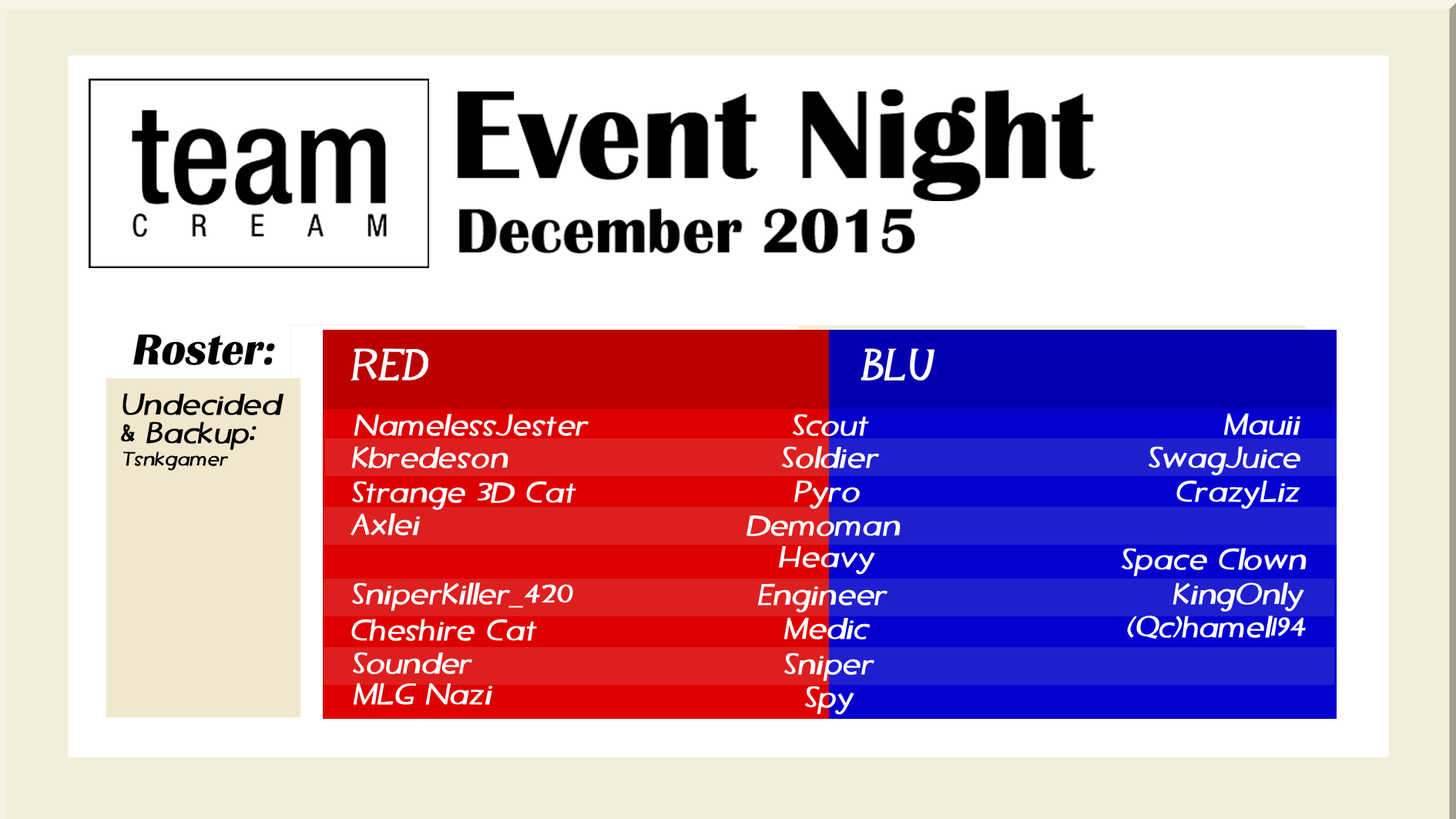
<style>
.page{position:relative;width:1456px;height:819px;background:#ffffff}
.page>*{position:absolute;margin:0}
.t1{font:44.8px "BritannicBold";color:#000000;font-style:italic}
.t2{font:44.8px "TF2";color:#ffffff;font-weight:bold;font-style:italic}
.t3{font:30px/28.8px "TF2Secondary";color:#000000;font-weight:bold;font-style:italic}
.t4{font:30px "TF2Secondary";color:#ffffff;font-weight:bold;font-style:italic}
.t5{font:19.2px "TF2Secondary";color:#000000;font-weight:bold;font-style:italic}
</style>
<div class="page">
<p class="t1" style="left:133px;top:334px;width:142px;height:31px">Roster:</p>
<p class="t2" style="left:351px;top:348px;width:77px;height:33px">Red</p>
<p class="t2" style="left:861px;top:348px;width:74px;height:33px">BLU</p>
<p class="t3" style="left:121px;top:393px;width:163px;height:57px">Undecided<br>&amp; Backup:</p>
<p class="t4" style="left:354px;top:414px;width:235px;height:22px">NamelessJester</p>
<p class="t4" style="left:793px;top:414px;width:76px;height:22px">Scout</p>
<p class="t4" style="left:1223px;top:413px;width:77px;height:22px">Mauii</p>
<p class="t4" style="left:351px;top:446px;width:157px;height:22px">Kbredeson</p>
<p class="t4" style="left:782px;top:446px;width:97px;height:22px">Soldier</p>
<p class="t4" style="left:1149px;top:446px;width:151px;height:29px">SwagJuice</p>
<p class="t5" style="left:123px;top:451px;width:105px;height:20px">Tsnkgamer</p>
<p class="t4" style="left:352px;top:481px;width:224px;height:29px">Strange 3D Cat</p>
<p class="t4" style="left:794px;top:480px;width:66px;height:29px">Pyro</p>
<p class="t4" style="left:1176px;top:480px;width:124px;height:29px">CrazyLiz</p>
<p class="t4" style="left:351px;top:513px;width:69px;height:22px">Axlei</p>
<p class="t4" style="left:747px;top:515px;width:154px;height:21px">Demoman</p>
<p class="t4" style="left:779px;top:545px;width:96px;height:30px">Heavy</p>
<p class="t4" style="left:1122px;top:548px;width:185px;height:28px">Space Clown</p>
<p class="t4" style="left:352px;top:582px;width:221px;height:29px">SniperKiller_420</p>
<p class="t4" style="left:758px;top:583px;width:130px;height:29px">Engineer</p>
<p class="t4" style="left:1173px;top:582px;width:131px;height:30px">KingOnly</p>
<p class="t4" style="left:784px;top:617px;width:86px;height:22px">Medic</p>
<p class="t4" style="left:1127px;top:616px;width:179px;height:23px">(Qc)hamel194</p>
<p class="t4" style="left:351px;top:619px;width:186px;height:22px">Cheshire Cat</p>
<p class="t4" style="left:353px;top:652px;width:119px;height:22px">Sounder</p>
<p class="t4" style="left:784px;top:653px;width:90px;height:28px">Sniper</p>
<p class="t4" style="left:353px;top:683px;width:139px;height:22px">MLG Nazi</p>
<p class="t4" style="left:805px;top:686px;width:49px;height:29px">Spy</p>
</div>
